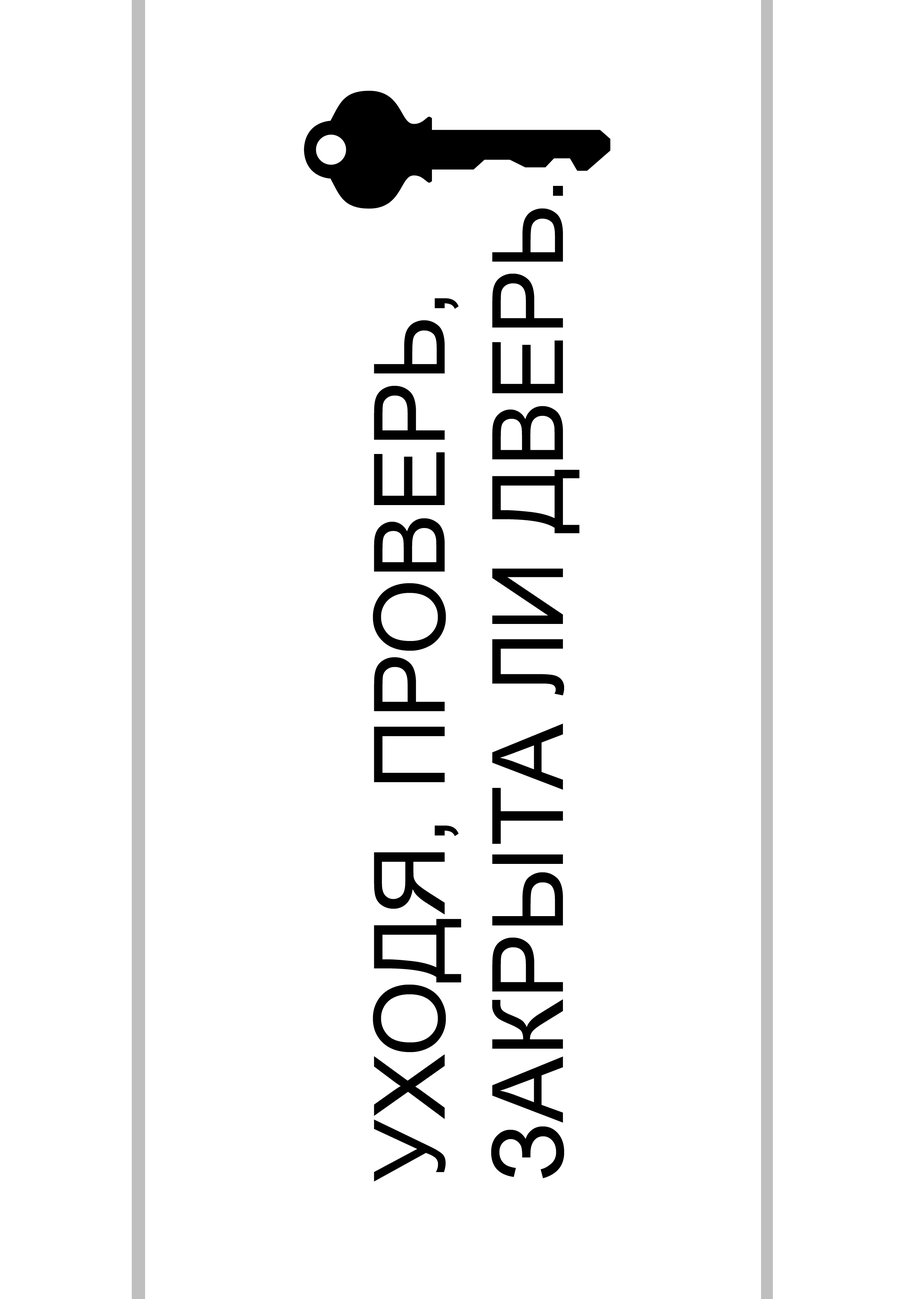
<style>
.page{position:relative;width:918px;height:1299px;background:#ffffff}
.page>*{position:absolute;margin:0}
.t1{font:98.5px "ArialMT";color:#000000}
</style>
<div class="page">
<p class="t1" style="left:373px;top:186px;width:207px;height:995px;rotate:-90deg">УХОДЯ, ПРОВЕРЬ,<br>ЗАКРЫТА ЛИ ДВЕРЬ.</p>
</div>
